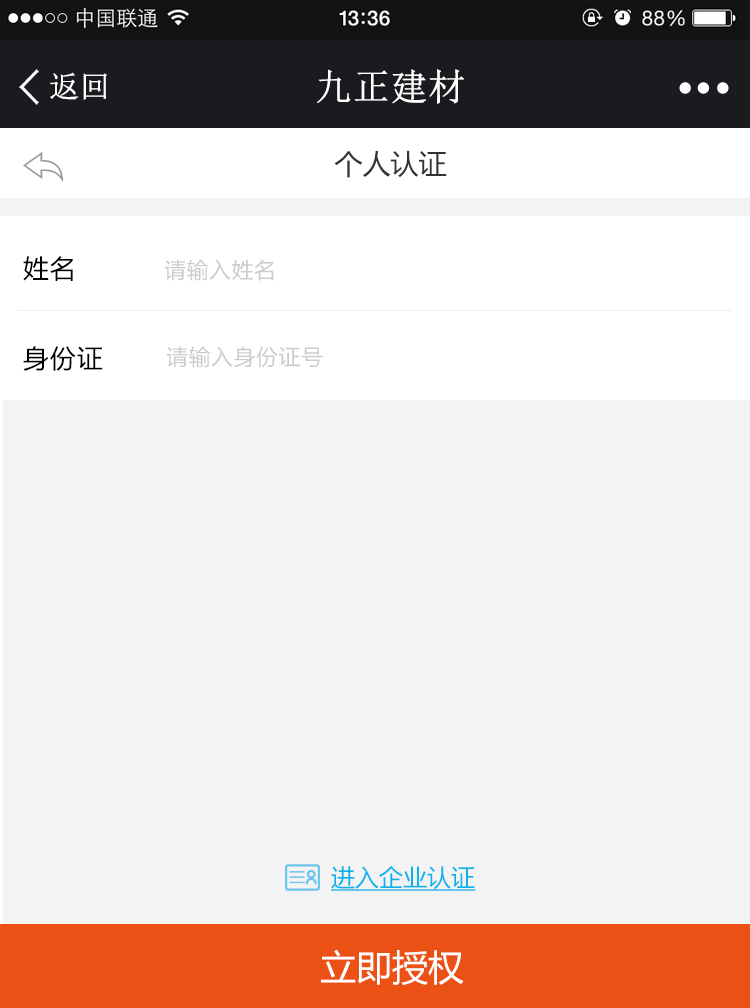
<style>
.page{position:relative;width:750px;height:1008px;background:#f3f3f3}
.page>*{position:absolute;margin:0}
.t1{font:30px "NSimSun";color:#ffffff;font-weight:bold}
.t2{font:36.7px "NSimSun";color:#ffffff;font-weight:bold}
.t3{font:28px "MicrosoftYaHei";color:#333333}
.t4{font:28px "MicrosoftYaHei";color:#333333;font-weight:bold}
.t5{font:25.7px "MicrosoftYaHei";letter-spacing:0.05em;color:#000000}
.t6{font:21.4px "MicrosoftYaHei";letter-spacing:0.05em;color:#cccccc}
.t7{font:24px "MicrosoftYaHei";color:#0bb3eb;text-decoration:underline}
.t8{font:36px "MicrosoftYaHei";color:#ffffff}
</style>
<div class="page">
<p class="t1" style="left:50px;top:72px;width:57px;height:28px">返回</p>
<p class="t2" style="left:317px;top:69px;width:147px;height:35px">九正建材</p>
<p class="t3" style="left:334px;top:150px;width:113px;height:28px"><span class="t4"><br></span>个人认证</p>
<p class="t5" style="left:23px;top:256px;width:50px;height:25px">姓名</p>
<p class="t6" style="left:164px;top:259px;width:110px;height:22px">请输入姓名</p>
<p class="t5" style="left:23px;top:346px;width:80px;height:25px">身份证</p>
<p class="t6" style="left:166px;top:346px;width:157px;height:22px">请输入身份证号</p>
<p class="t7" style="left:331px;top:866px;width:145px;height:25px">进入企业认证</p>
<p class="t8" style="left:321px;top:949px;width:143px;height:36px">立即授权</p>
</div>
